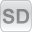
<style>
.page{position:relative;width:32px;height:32px}
.page>*{position:absolute;margin:0}
.t1{font:20px "Arial-BoldMT";color:#868787}
</style>
<div class="page">
<p class="t1" style="left:2px;top:8px;width:27px;height:16px">SD</p>
</div>
